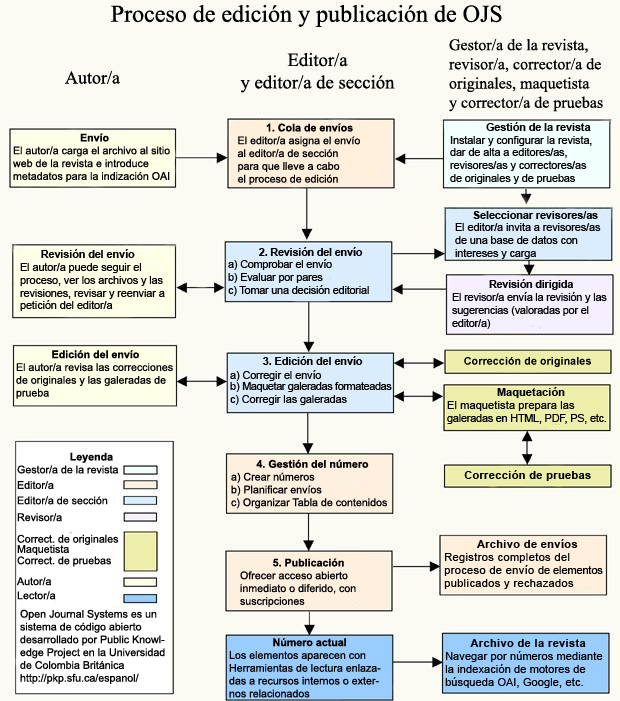
<style>
.page{position:relative;width:620px;height:701px;background:#fbfbf3}
.page>*{position:absolute;margin:0}
.t1{font:24px "TimesNewRomanPSMT";color:#000000}
.t2{font:16px "TimesNewRomanPSMT";color:#000000}
.t3{font:18.7px "TimesNewRomanPSMT";color:#000000}
.t4{font:18px "TimesNewRomanPSMT";color:#000000}
.t5{font:10.7px "ArialMT";color:#000000}
.t6{font:10.7px "Arial-BoldMT";color:#000000}
.t7{font:10.7px "ArialMT";letter-spacing:-0.01em;color:#000000}
.t8{font:10.7px "Arial-BoldMT";letter-spacing:-0.01em;color:#000000}
.t9{font:10.7px "ArialMT";letter-spacing:-0.025em;color:#000000}
.t10{font:10.7px "Arial-BoldMT";letter-spacing:0.01em;color:#000000}
.t11{font:10.7px "Arial-BoldMT";letter-spacing:0.025em;color:#000000}
.t12{font:10.7px "ArialMT";letter-spacing:0.025em;color:#000000}
.t13{font:10.7px "Arial-BoldMT";letter-spacing:0.05em;color:#000000}
.t14{font:10.7px "ArialMT";letter-spacing:0.05em;color:#000000}
.t15{font:10.7px "ArialMT";letter-spacing:0.005em;color:#000000}
</style>
<div class="page">
<p class="t1" style="left:111px;top:5px;width:391px;height:22px">Proceso de edición y publicación de OJS</p>
<p class="t2" style="left:449px;top:39px;width:154px;height:73px">Gestor/a de la revista, revisor/a, corrector/a de originales, maquetista <br>y corrector/a de pruebas</p>
<p class="t3" style="left:240px;top:53px;width:155px;height:40px;text-align:center">Editor/a <br>y editor/a de sección</p>
<p class="t4" style="left:65px;top:71px;width:55px;height:13px">Autor/a</p>
<p class="t5" style="left:237px;top:123px;width:123px;height:62px;text-align:center"><span class="t6">    1. Cola de envíos<br></span>El editor/a asigna el envío <br>al editor/a de sección <br>para que lleve a cabo <br>el proceso de edición</p>
<p class="t5" style="left:450px;top:122px;width:142px;height:62px"><span class="t6"> Gestión de la revista<br></span>Instalar y configurar la revista, <br>dar de alta a editores/as, <br>revisores/as y correctores/as <br>de originales y de pruebas</p>
<p class="t5" style="left:13px;top:133px;width:157px;height:49px;text-align:center"><span class="t6">Envío<br></span>El autor/a carga el archivo al sitio web de la revista e introduce metadatos para la indización OAI</p>
<p class="t5" style="left:455px;top:211px;width:146px;height:48px;text-align:center"><span class="t6"> Seleccionar revisores/as</span><br>El editor/a invita a revisores/as de una base de datos con intereses y carga</p>
<p class="t5" style="left:20px;top:249px;width:145px;height:62px"><span class="t6">       Revisión del envío<br></span>El autor/a puede seguir el proceso, ver los archivos y las revisiones, revisar y reenviar a petición del editor/a</p>
<p class="t7" style="left:228px;top:247px;width:141px;height:49px;text-align:center"><span class="t8">2. Revisión del envío<br></span>a) Comprobar el envío<br>b) Evaluar por pares<br>c) Tomar una decisión editorial</p>
<p class="t7" style="left:452px;top:279px;width:155px;height:50px;text-align:center"><span class="t8">Revisión dirigida<br></span>El revisor/a envía la revisión y las sugerencias (valoradas por el editor/a)</p>
<p class="t5" style="left:16px;top:350px;width:157px;height:49px;text-align:center"><span class="t6">Edición del envío<br></span>El autor/a revisa las correcciones de originales y las galeradas de prueba</p>
<p class="t9" style="left:230px;top:356px;width:162px;height:49px;text-align:center"><span class="t6">3. Edición del envío<br></span><span class="t5">a) Corregir el envío<br>b)</span> Maquetar galeradas formateadas<br><span class="t5">c) Corregir las galeradas</span></p>
<p class="t10" style="left:464px;top:357px;width:127px;height:10px">Corrección de originales</p>
<p class="t7" style="left:447px;top:387px;width:159px;height:37px;text-align:center"><span class="t11">Maquetación<br></span><span class="t12">El maquetista prepara las <br></span>galeradas en HTML, PDF, PS, etc.</p>
<p class="t5" style="left:17px;top:452px;width:102px;height:148px"><span class="t6"><br>Leyenda<br></span>Gestor/a de la revista<br>Editor/a<br>Editor/a de sección<br>Revisor/a<br><br>Correct. de originales<br>Maquetista<br>Correct. de pruebas<br>Autor/a<br>Lector/a</p>
<p class="t5" style="left:231px;top:459px;width:156px;height:50px;text-align:center"><span class="t6">4. Gestión del número<br></span>a) Crear números<br>b) Planificar envíos<br>c) Organizar Tabla de contenidos</p>
<p class="t13" style="left:464px;top:470px;width:127px;height:11px">Corrección de pruebas</p>
<p class="t14" style="left:444px;top:539px;width:159px;height:50px;text-align:center"><span class="t13">Archivo de envíos<br></span>Registros completos del proceso de envío <span class="t15">de elemento</span>s publicados y rechazados</p>
<p class="t5" style="left:240px;top:558px;width:116px;height:49px;text-align:center"><span class="t6">5. Publicación<br></span>Ofrecer acceso abierto inmediato o diferido, con suscripciones</p>
<p class="t5" style="left:20px;top:609px;width:145px;height:75px">Open Journal Systems es un sistema de código abierto desarrollado por Public Knowledge Project en la Universidad de Colombia Británica http://pkp.sfu.ca/espanol/</p>
<p class="t5" style="left:229px;top:638px;width:152px;height:60px;text-align:center"><span class="t6">Número actual<br></span>Los elementos aparecen con Herramientas de lectura enlazadas a recursos internos o externos relacionados</p>
<p class="t12" style="left:445px;top:639px;width:158px;height:49px;text-align:center"><span class="t13">Archivo de la revista<br></span>Navegar por números mediante la indexación de motores de búsqueda OAI, Google, etc.</p>
</div>
